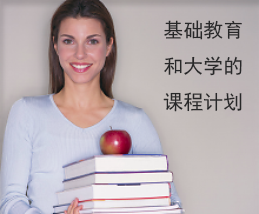
<style>
.page{position:relative;width:259px;height:214px}
.page>*{position:absolute;margin:0}
.t1{font:20px/36px "SimHei";color:#282829}
</style>
<div class="page">
<p class="t1" style="left:163px;top:20px;width:79px;height:92px;text-align:center">基础教育<br>和大学的<br>课程计划</p>
</div>
